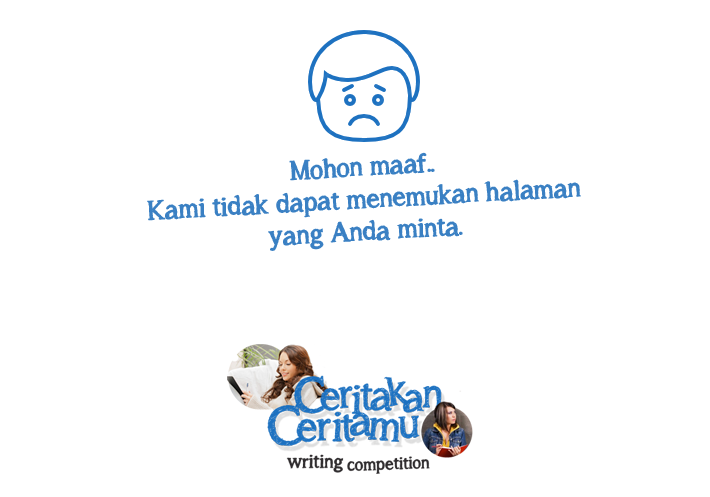
<style>
.page{position:relative;width:710px;height:497px;background:#ffffff}
.page>*{position:absolute;margin:0}
.t1{font:26.9px/32.3px "asongforjennifer";color:#3a80c3}
</style>
<div class="page">
<p class="t1" style="left:147px;top:152px;width:434px;height:99px;text-align:center;rotate:-3deg">Mohon maaf..<br>Kami tidak dapat menemukan halaman<br>yang Anda minta.</p>
</div>
